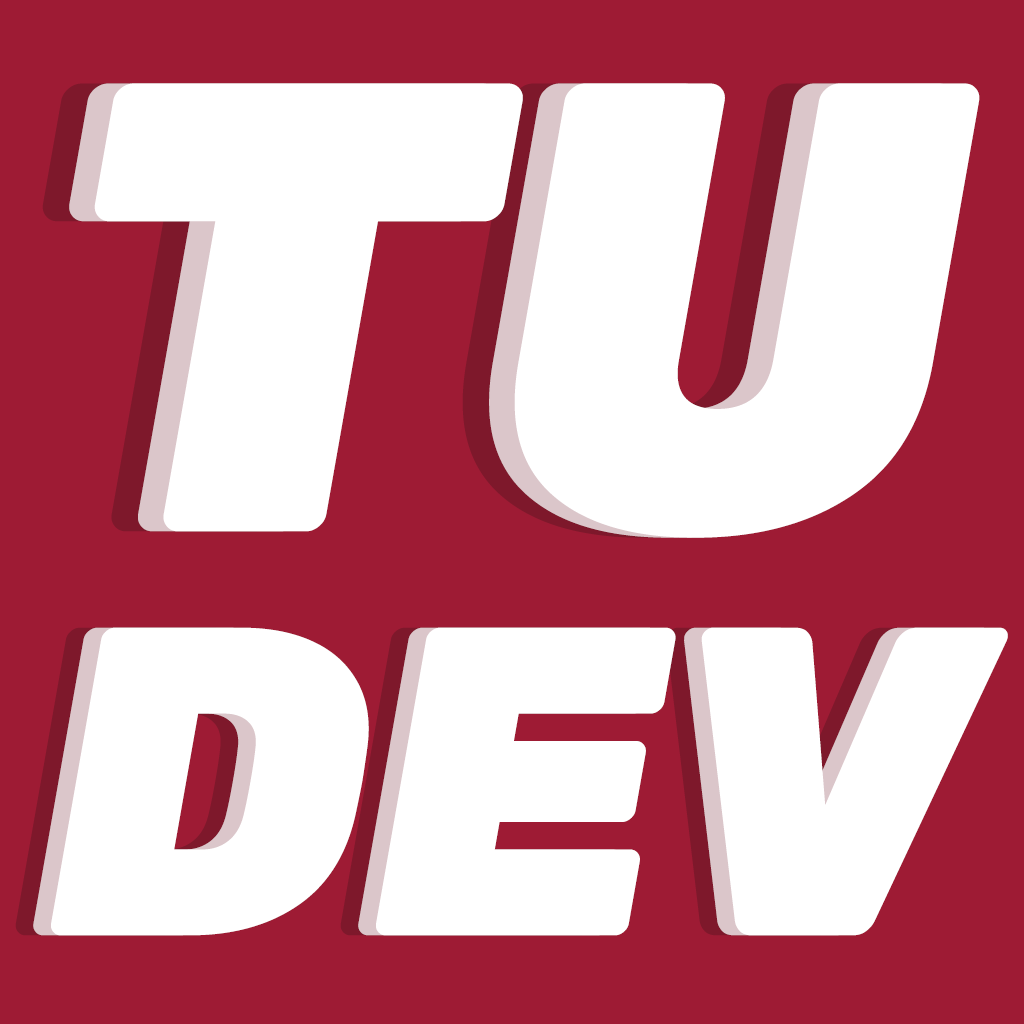
<style>
.page{position:relative;width:1024px;height:1024px;background:#9e1b34}
.page>*{position:absolute;margin:0}
.t1{font:639.3px "Rubik-Black";color:#ffffff;font-style:italic}
.t2{font:439.1px "Rubik-Black";color:#ffffff;font-style:italic}
</style>
<div class="page">
<p class="t1" style="left:42px;top:83px;width:886px;height:455px">TU</p>
<p class="t1" style="left:69px;top:83px;width:885px;height:455px">TU</p>
<p class="t1" style="left:94px;top:83px;width:886px;height:455px">TU</p>
<p class="t2" style="left:15px;top:627px;width:958px;height:309px">DEV</p>
<p class="t2" style="left:33px;top:627px;width:958px;height:309px">DEV</p>
<p class="t2" style="left:51px;top:627px;width:957px;height:309px">DEV</p>
</div>
